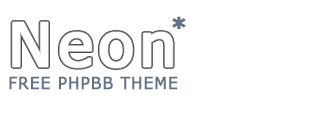
<style>
.page{position:relative;width:320px;height:120px;background:#ffffff}
.page>*{position:absolute;margin:0}
.t1{font:24px "Verdana-Bold";letter-spacing:0.05em;color:#617385;font-weight:bold}
.t2{font:60px "Verdana";letter-spacing:0.05em;color:#ffffff;font-weight:bold}
.t3{font:17px "Verdana";letter-spacing:0.05em;color:#617385;font-weight:bold;scale:0.89 1}
</style>
<div class="page">
<p class="t1" style="left:172px;top:16px;width:14px;height:13px">*</p>
<p class="t2" style="left:12px;top:22px;width:161px;height:46px">Neon</p>
<p class="t3" style="left:9px;top:76px;width:169px;height:14px">FREE PHPBB THEME</p>
</div>
